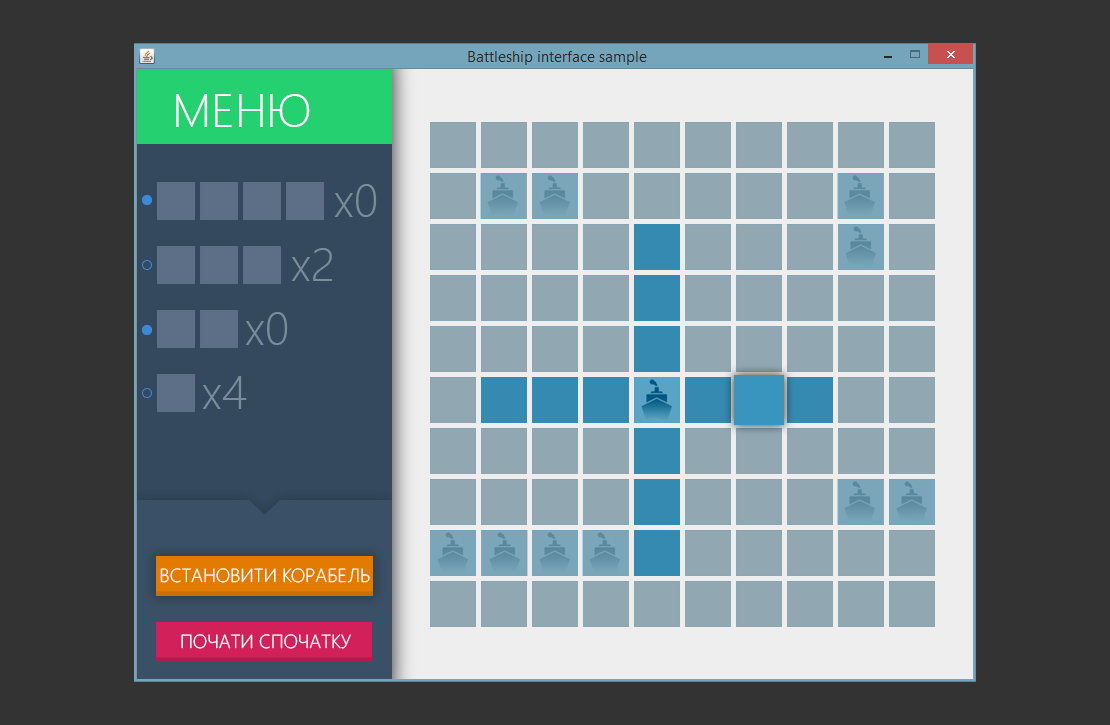
<style>
.page{position:relative;width:1110px;height:725px;background:#333333}
.page>*{position:absolute;margin:0}
.t1{font:47px "SegoeUI-Light";color:#ffffff;text-transform:uppercase}
.t2{font:47px "SegoeUI-Light";color:#7a8d9b}
.t3{font:47px "SegoeUI-Light";color:#7a8d9b;text-transform:uppercase}
.t4{font:19px "SegoeUI-Light";color:#ffffff;text-transform:uppercase}
</style>
<div class="page">
<p class="t1" style="left:176px;top:94px;width:134px;height:33px">МЕНЮ</p>
<p class="t2" style="left:334px;top:184px;width:43px;height:33px">x<span class="t3">0</span></p>
<p class="t2" style="left:291px;top:248px;width:41px;height:33px">x<span class="t3">2</span></p>
<p class="t2" style="left:245px;top:312px;width:43px;height:33px">x<span class="t3">0</span></p>
<p class="t2" style="left:202px;top:376px;width:45px;height:33px">x<span class="t3">4</span></p>
<p class="t4" style="left:160px;top:568px;width:210px;height:15px">ВСТАНОВИТИ КОРАБЕЛЬ</p>
<p class="t4" style="left:181px;top:634px;width:170px;height:15px">ПОЧАТИ СПОЧАТКУ</p>
</div>
